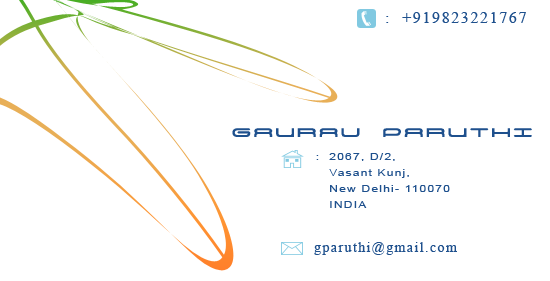
<style>
.page{position:relative;width:550px;height:281px;background:#ffffff}
.page>*{position:absolute;margin:0}
.t1{font:16px "TimesNewRomanPSMT";letter-spacing:0.1em;color:#1e508d}
.t2{font:30px "BNYear2000";letter-spacing:0.1em;color:#1e508d;scale:1.1 1}
.t3{font:10px/16px "ArialMT";letter-spacing:0.1em;color:#1e508d;scale:1.2 1}
.t4{font:14px "TimesNewRomanPSMT";letter-spacing:0.1em;color:#1e508d}
</style>
<div class="page">
<p class="t1" style="left:386px;top:12px;width:140px;height:11px">:  +919823221767</p>
<p class="t2" style="left:232px;top:128px;width:300px;height:9px">GAURAV PARUTHI</p>
<p class="t3" style="left:316px;top:153px;width:134px;height:55px">:  2067, D/2, <br>   Vasant Kunj, <br>   New Delhi- 110070<br>   INDIA</p>
<p class="t4" style="left:314px;top:242px;width:143px;height:13px">gparuthi@gmail.com</p>
</div>
